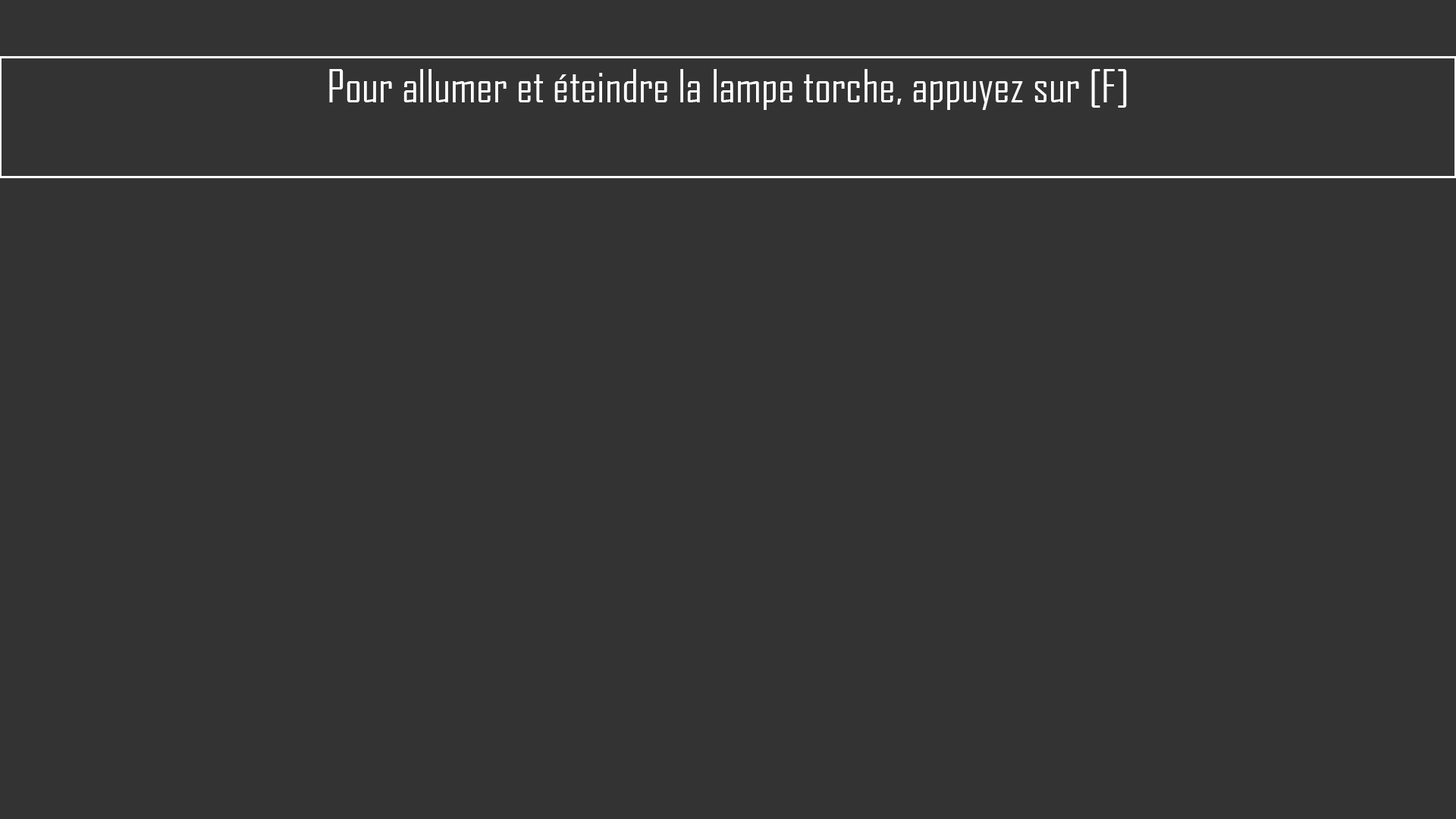
<style>
.page{position:relative;width:1456px;height:819px;background:#333333}
.page>*{position:absolute;margin:0}
.t1{font:44.2px "AgencyFB-Reg";color:#ffffff}
</style>
<div class="page">
<p class="t1" style="left:329px;top:69px;width:798px;height:41px">Pour allumer et éteindre la lampe torche, appuyez sur [F]</p>
</div>
